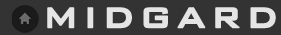
<style>
.page{position:relative;width:281px;height:35px;background:#333333}
.page>*{position:absolute;margin:0}
.t1{font:38px "BankGothicBT-Medium";letter-spacing:0.1em;color:#e6e6e6;text-transform:uppercase;font-weight:bold}
</style>
<div class="page">
<p class="t1" style="left:47px;top:7px;width:229px;height:22px">midgard</p>
</div>
